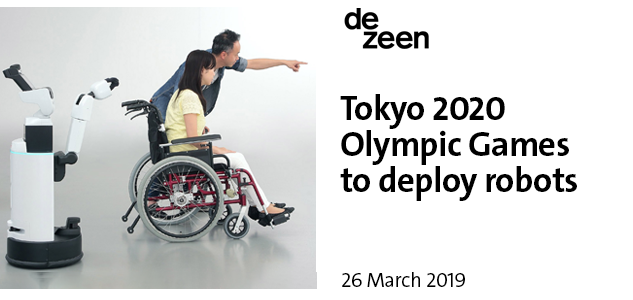
<style>
.page{position:relative;width:633px;height:300px;background:#ffffff}
.page>*{position:absolute;margin:0}
.t1{font:35px/36px "V&ATheSansC6s-Bold";letter-spacing:-0.02em;color:#000000}
.t2{font:20.8px "V&ATheSansC6s-SemiLight";letter-spacing:-0.02em;color:#000000}
</style>
<div class="page">
<p class="t1" style="left:340px;top:94px;width:237px;height:107px">Tokyo 2020<br>Olympic Games<br>to deploy robots</p>
<p class="t2" style="left:342px;top:272px;width:123px;height:15px">26 March 2019</p>
</div>
